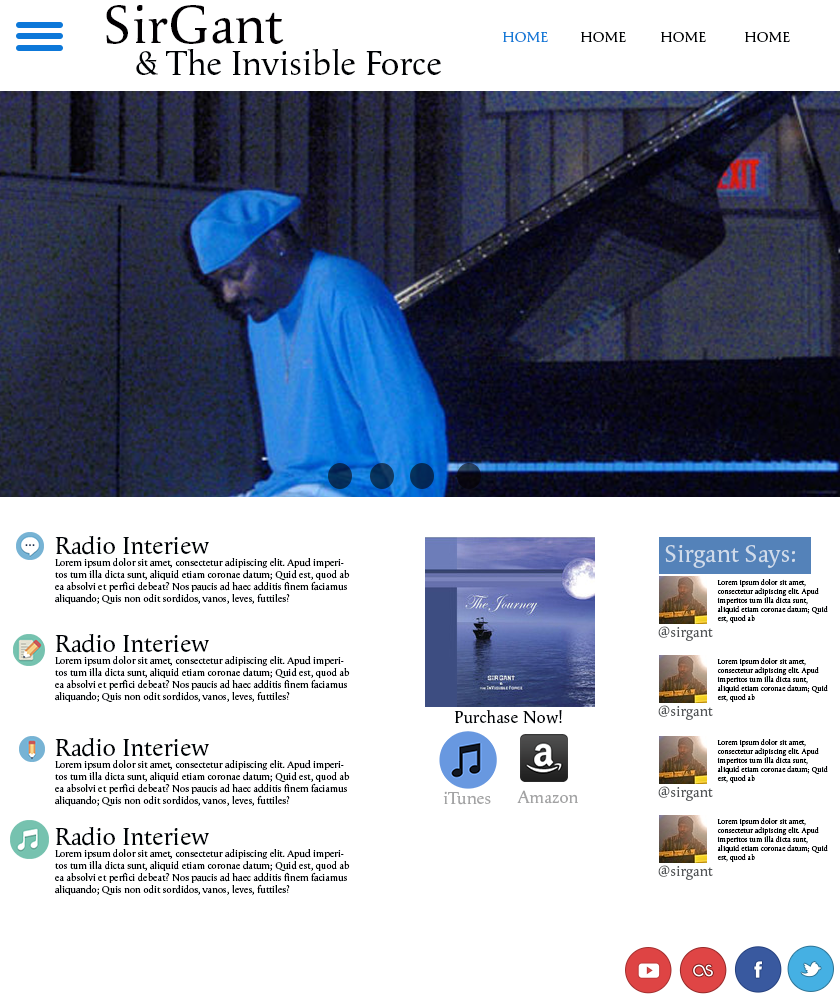
<style>
.page{position:relative;width:840px;height:1000px;background:#ffffff}
.page>*{position:absolute;margin:0}
.t1{font:55px "Apolline-Regular";color:#020002}
.t2{font:15px "Apolline-Regular";color:#157bd7}
.t3{font:15px "Apolline-Regular";color:#000204}
.t4{font:35px "Apolline-Regular";color:#000204}
.t5{font:10px "Apolline-Regular";color:#000306}
.t6{font:25px "Apolline-Regular";color:#000306}
.t7{font:25px "Apolline-Regular";color:#d0dbea}
.t8{font:7.5px "Apolline-Regular";color:#000204}
.t9{font:15px "Apolline-Regular";color:#525557}
.t10{font:17.5px "Apolline-Regular";color:#000306}
.t11{font:17.5px "Apolline-Regular";color:#a3a3a4}
</style>
<div class="page">
<p class="t1" style="left:106px;top:5px;width:178px;height:39px">SirGant</p>
<p class="t2" style="left:503px;top:32px;width:45px;height:10px">HOME</p>
<p class="t3" style="left:581px;top:32px;width:45px;height:10px">HOME</p>
<p class="t3" style="left:661px;top:32px;width:45px;height:10px">HOME</p>
<p class="t3" style="left:745px;top:32px;width:45px;height:10px">HOME</p>
<p class="t4" style="left:136px;top:49px;width:305px;height:26px">&amp; The Invisible Force</p>
<p class="t5" style="left:55px;top:536px;width:295px;height:68px"><span class="t6">Radio Interiew<br></span>Lorem ipsum dolor sit amet, consectetur adipiscing elit. Apud imperitos tum illa dicta sunt, aliquid etiam coronae datum; Quid est, quod ab ea absolvi et perfici debeat? Nos paucis ad haec additis finem faciamus aliquando; Quis non odit sordidos, vanos, leves, futtiles?</p>
<p class="t7" style="left:665px;top:545px;width:130px;height:23px">Sirgant Says:</p>
<p class="t8" style="left:717px;top:579px;width:111px;height:44px">Lorem ipsum dolor sit amet, consectetur adipiscing elit. Apud imperitos tum illa dicta sunt, aliquid etiam coronae datum; Quid est, quod ab</p>
<p class="t9" style="left:658px;top:626px;width:55px;height:15px">@sirgant</p>
<p class="t5" style="left:55px;top:634px;width:295px;height:68px"><span class="t6">Radio Interiew<br></span>Lorem ipsum dolor sit amet, consectetur adipiscing elit. Apud imperitos tum illa dicta sunt, aliquid etiam coronae datum; Quid est, quod ab ea absolvi et perfici debeat? Nos paucis ad haec additis finem faciamus aliquando; Quis non odit sordidos, vanos, leves, futtiles?</p>
<p class="t8" style="left:717px;top:658px;width:111px;height:44px">Lorem ipsum dolor sit amet, consectetur adipiscing elit. Apud imperitos tum illa dicta sunt, aliquid etiam coronae datum; Quid est, quod ab</p>
<p class="t10" style="left:454px;top:710px;width:108px;height:14px">Purchase Now!</p>
<p class="t9" style="left:658px;top:705px;width:55px;height:15px">@sirgant</p>
<p class="t5" style="left:55px;top:738px;width:295px;height:68px"><span class="t6">Radio Interiew<br></span>Lorem ipsum dolor sit amet, consectetur adipiscing elit. Apud imperitos tum illa dicta sunt, aliquid etiam coronae datum; Quid est, quod ab ea absolvi et perfici debeat? Nos paucis ad haec additis finem faciamus aliquando; Quis non odit sordidos, vanos, leves, futtiles?</p>
<p class="t8" style="left:717px;top:739px;width:111px;height:44px">Lorem ipsum dolor sit amet, consectetur adipiscing elit. Apud imperitos tum illa dicta sunt, aliquid etiam coronae datum; Quid est, quod ab</p>
<p class="t11" style="left:443px;top:791px;width:48px;height:14px">iTunes</p>
<p class="t11" style="left:517px;top:790px;width:61px;height:14px">Amazon</p>
<p class="t9" style="left:658px;top:786px;width:55px;height:15px">@sirgant</p>
<p class="t8" style="left:717px;top:818px;width:111px;height:44px">Lorem ipsum dolor sit amet, consectetur adipiscing elit. Apud imperitos tum illa dicta sunt, aliquid etiam coronae datum; Quid est, quod ab</p>
<p class="t5" style="left:55px;top:827px;width:295px;height:68px"><span class="t6">Radio Interiew<br></span>Lorem ipsum dolor sit amet, consectetur adipiscing elit. Apud imperitos tum illa dicta sunt, aliquid etiam coronae datum; Quid est, quod ab ea absolvi et perfici debeat? Nos paucis ad haec additis finem faciamus aliquando; Quis non odit sordidos, vanos, leves, futtiles?</p>
<p class="t9" style="left:658px;top:865px;width:55px;height:15px">@sirgant</p>
</div>
